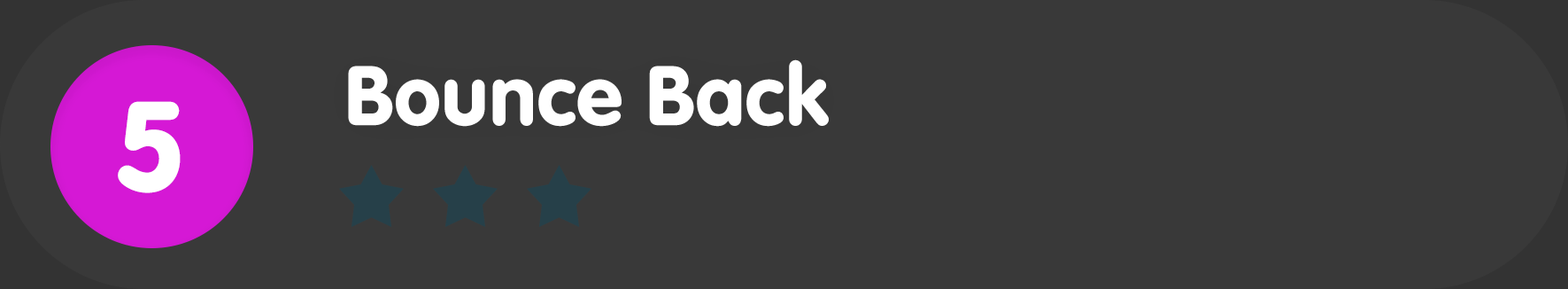
<style>
.page{position:relative;width:1568px;height:289px;background:#393939}
.page>*{position:absolute;margin:0}
.t1{font:88.5px "VAGRundschriftD";color:#ffffff}
.t2{font:132.8px "VAGRundschriftD";color:#ffffff}
</style>
<div class="page">
<p class="t1" style="left:348px;top:59px;width:481px;height:68px">Bounce Back</p>
<p class="t2" style="left:118px;top:101px;width:63px;height:92px">5</p>
</div>
